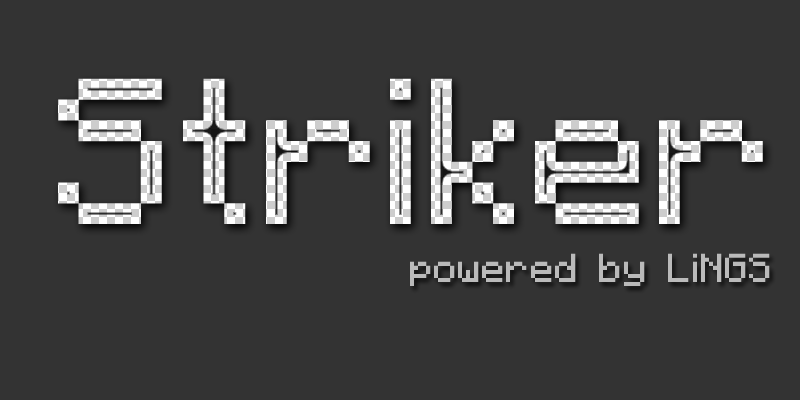
<style>
.page{position:relative;width:800px;height:400px;background:#333333}
.page>*{position:absolute;margin:0}
.t1{font:165.7px "Minecraftia"}
.t2{font:32.2px "Minecraftia";color:#bababa}
</style>
<div class="page">
<p class="t1" style="left:58px;top:78px;width:705px;height:146px">Striker</p>
<p class="t2" style="left:410px;top:253px;width:360px;height:33px">powered by LiNGS</p>
</div>
